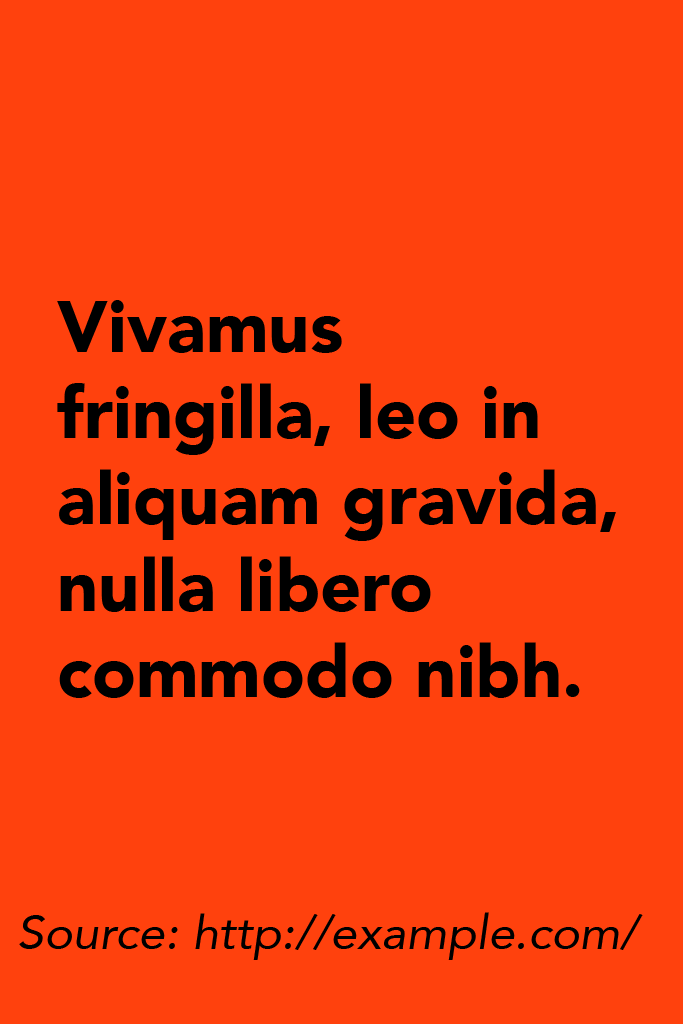
<style>
.page{position:relative;width:683px;height:1024px;background:#ff410d}
.page>*{position:absolute;margin:0}
.t1{font:72px "Avenir-Black";color:#000000}
.t2{font:48px "Avenir-Oblique";color:#000000}
</style>
<div class="page">
<p class="t1" style="left:57px;top:300px;width:559px;height:398px">Vivamus fringilla, leo in aliquam gravida, nulla libero commodo nibh.</p>
<p class="t2" style="left:19px;top:912px;width:624px;height:48px">Source: http://example.com/</p>
</div>
